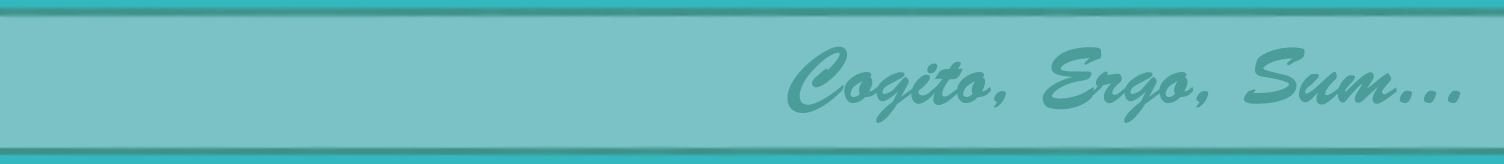
<style>
.page{position:relative;width:1504px;height:164px;background:#7ac2c6}
.page>*{position:absolute;margin:0}
.t1{font:80px "BrushScriptStd";color:#4b9d99}
</style>
<div class="page">
<p class="t1" style="left:787px;top:46px;width:674px;height:77px">Cogito, Ergo, Sum...</p>
</div>
